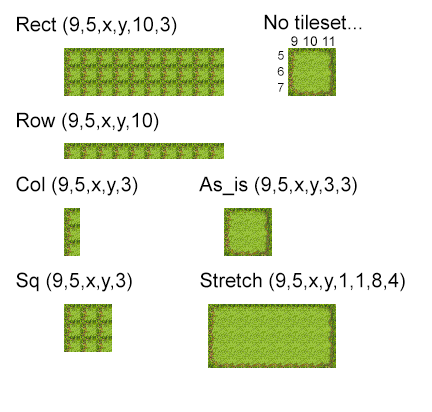
<style>
.page{position:relative;width:432px;height:412px;background:#ffffff}
.page>*{position:absolute;margin:0}
.t1{font:20px "ArialMT";color:#000000}
.t2{font:14px "ArialMT";color:#000000}
.t3{font:12px/16px "ArialMT";color:#000000}
</style>
<div class="page">
<p class="t1" style="left:17px;top:16px;width:160px;height:20px">Rect (9,5,x,y,10,3)</p>
<p class="t1" style="left:264px;top:14px;width:98px;height:32px;text-align:center">No tileset...<br><span class="t2">9 10 11</span></p>
<p class="t3" style="left:277px;top:51px;width:7px;height:41px;text-align:center">5<br>6<br>7</p>
<p class="t1" style="left:17px;top:112px;width:142px;height:20px">Row (9,5,x,y,10)</p>
<p class="t1" style="left:16px;top:176px;width:122px;height:20px">Col (9,5,x,y,3)</p>
<p class="t1" style="left:199px;top:176px;width:158px;height:20px">As_is (9,5,x,y,3,3)</p>
<p class="t1" style="left:16px;top:272px;width:116px;height:20px">Sq (9,5,x,y,3)</p>
<p class="t1" style="left:200px;top:272px;width:205px;height:20px">Stretch (9,5,x,y,1,1,8,4)</p>
</div>
